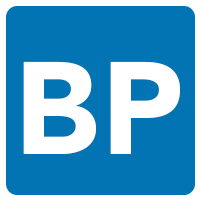
<style>
.page{position:relative;width:200px;height:200px;background:#0274b3}
.page>*{position:absolute;margin:0}
.t1{font:130.2px "Avenir-Black";letter-spacing:0.02em;color:#ffffff}
</style>
<div class="page">
<p class="t1" style="left:23px;top:61px;width:157px;height:93px">BP</p>
</div>
